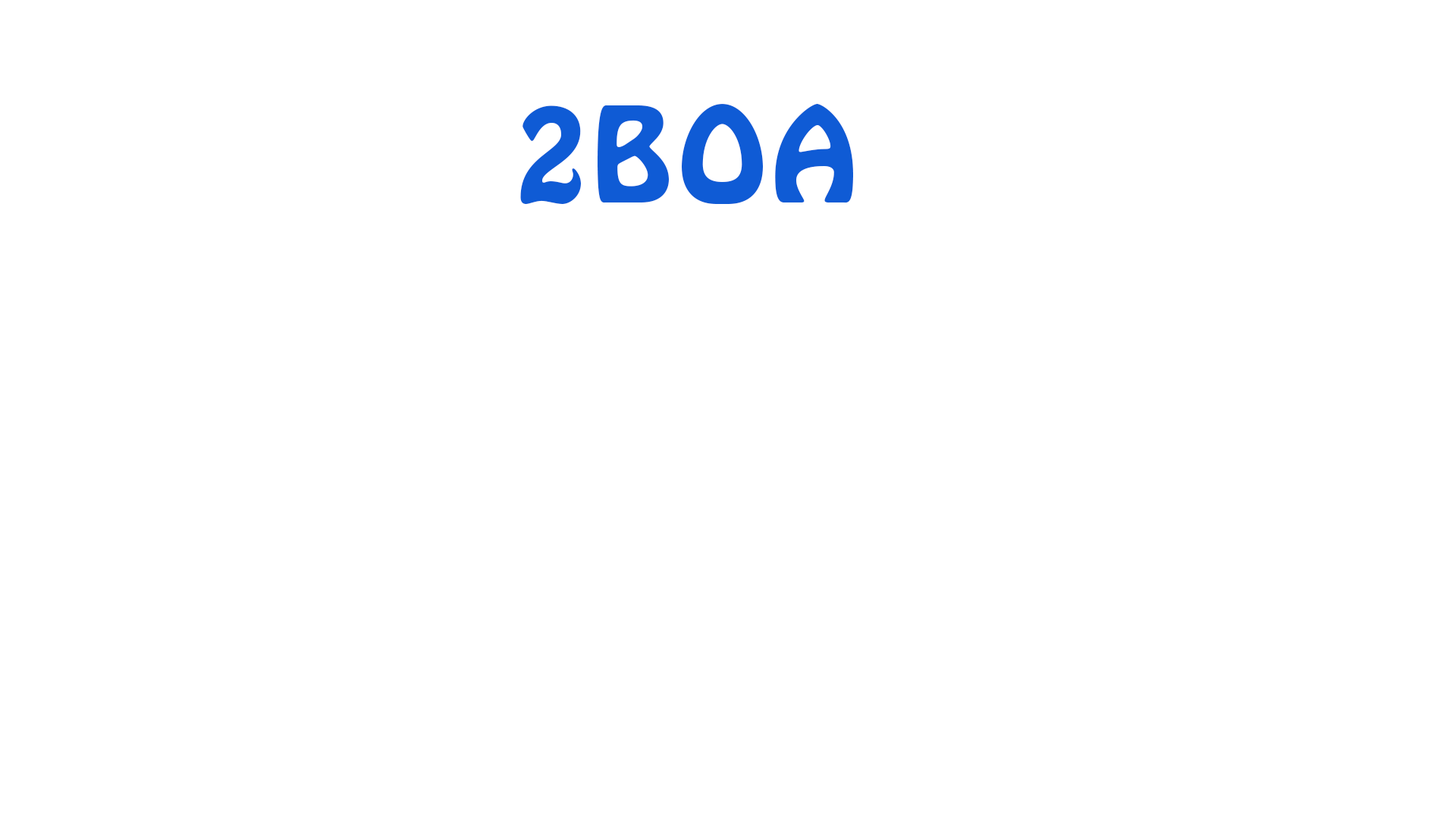
<style>
.page{position:relative;width:1456px;height:819px;background:#ffffff}
.page>*{position:absolute;margin:0}
.t1{font:115.1px "HoboStd";letter-spacing:0.03em;color:#0f5bd5;font-weight:bold;scale:1.05 1}
</style>
<div class="page">
<p class="t1" style="left:520px;top:104px;width:333px;height:100px">2BOA</p>
</div>
